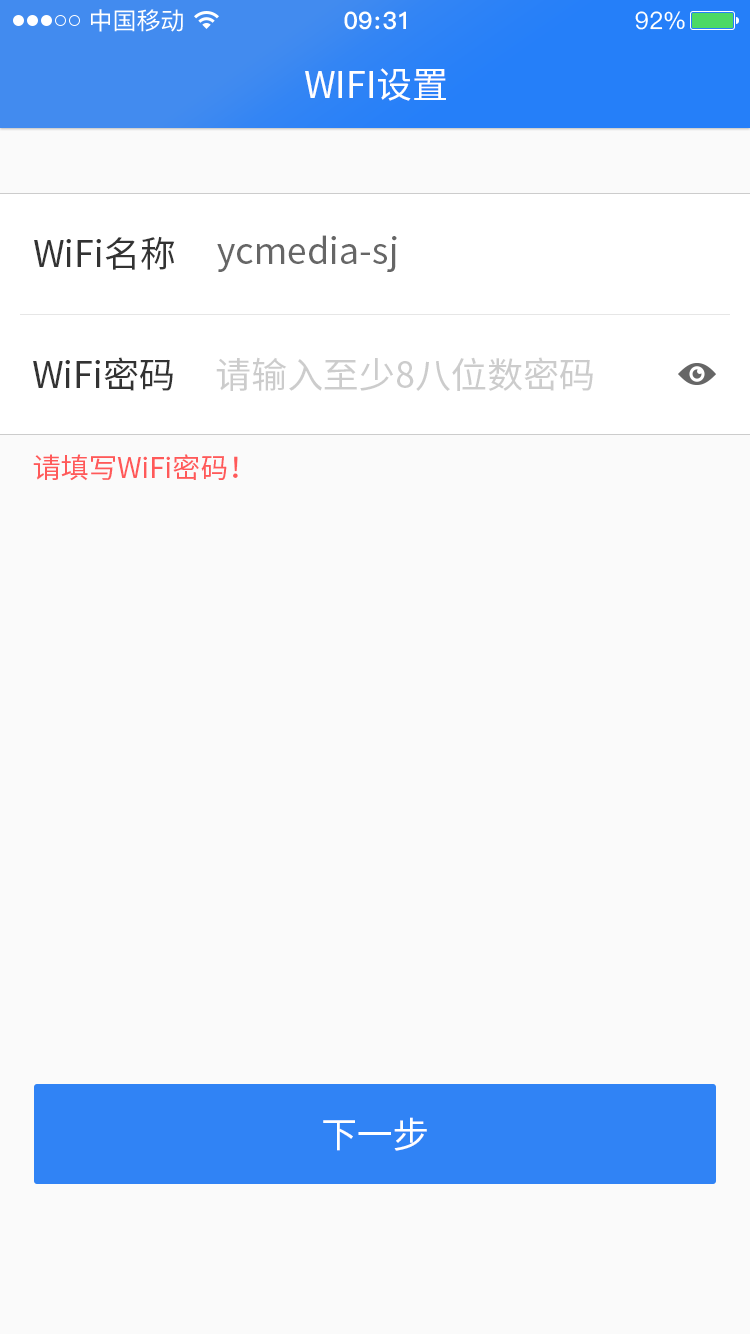
<style>
.page{position:relative;width:750px;height:1334px;background:#fafafa}
.page>*{position:absolute;margin:0}
.t1{font:36px "SourceHanSansCN-Regular";color:#ffffff}
.t2{font:36px "SourceHanSansCN-Regular";color:#333333}
.t3{font:36px "SourceHanSansCN-Regular";color:#666666}
.t4{font:36px "SourceHanSansCN-Regular";color:#cccccc}
.t5{font:28px "SourceHanSansCN-Regular";color:#ff5959}
</style>
<div class="page">
<p class="t1" style="left:305px;top:68px;width:141px;height:33px">WIFI设置</p>
<p class="t2" style="left:34px;top:236px;width:141px;height:34px">WiFi名称</p>
<p class="t3" style="left:217px;top:235px;width:180px;height:37px">ycmedia-sj</p>
<p class="t2" style="left:33px;top:357px;width:140px;height:34px">WiFi密码</p>
<p class="t4" style="left:216px;top:357px;width:377px;height:34px">请输入至少8八位数密码</p>
<p class="t5" style="left:33px;top:454px;width:205px;height:27px">请填写WiFi密码！</p>
<p class="t1" style="left:323px;top:1117px;width:104px;height:34px">下一步</p>
</div>
